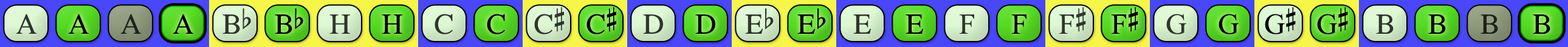
<style>
.page{position:relative;width:1568px;height:47px}
.page>*{position:absolute;margin:0}
.t1{font:29.2px "OpusChords";color:#2f352d}
.t2{font:29.2px "OpusChords";color:#000000}
.t3{font:29.2px "OpusChords";color:#1e211b}
.t4{font:29.2px "OpusChords";color:#30352d}
.t5{font:29.2px "OpusChords";color:#30362e}
.t6{font:29.2px "OpusChords";letter-spacing:-0.025em;color:#000000}
.t7{font:29.2px "OpusChords";color:#1f211b}
</style>
<div class="page">
<p class="t1" style="left:16px;top:14px;width:20px;height:20px">A</p>
<p class="t2" style="left:68px;top:14px;width:21px;height:20px">A</p>
<p class="t3" style="left:120px;top:14px;width:21px;height:20px">A</p>
<p class="t2" style="left:173px;top:14px;width:20px;height:20px">A</p>
<p class="t4" style="left:222px;top:9px;width:29px;height:25px">Bb</p>
<p class="t2" style="left:275px;top:9px;width:28px;height:25px">Bb</p>
<p class="t4" style="left:329px;top:15px;width:21px;height:19px">H</p>
<p class="t2" style="left:382px;top:15px;width:20px;height:19px">H</p>
<p class="t5" style="left:435px;top:14px;width:18px;height:21px">C</p>
<p class="t2" style="left:487px;top:14px;width:18px;height:21px">C</p>
<p class="t1" style="left:534px;top:7px;width:30px;height:28px">C#</p>
<p class="t2" style="left:586px;top:7px;width:30px;height:28px">C#</p>
<p class="t1" style="left:643px;top:15px;width:20px;height:19px">D</p>
<p class="t2" style="left:695px;top:15px;width:20px;height:19px">D</p>
<p class="t4" style="left:745px;top:9px;width:29px;height:25px">Eb</p>
<p class="t2" style="left:797px;top:9px;width:29px;height:25px">Eb</p>
<p class="t5" style="left:853px;top:15px;width:18px;height:19px">E</p>
<p class="t2" style="left:906px;top:15px;width:17px;height:19px">E</p>
<p class="t5" style="left:959px;top:15px;width:15px;height:19px">F</p>
<p class="t2" style="left:1011px;top:15px;width:15px;height:19px">F</p>
<p class="t4" style="left:1059px;top:7px;width:27px;height:27px">F#</p>
<p class="t2" style="left:1111px;top:7px;width:27px;height:27px">F#</p>
<p class="t1" style="left:1166px;top:14px;width:20px;height:21px">G</p>
<p class="t2" style="left:1219px;top:14px;width:20px;height:21px">G</p>
<p class="t6" style="left:1265px;top:7px;width:31px;height:28px">G#</p>
<p class="t6" style="left:1317px;top:7px;width:31px;height:28px">G#</p>
<p class="t4" style="left:1376px;top:15px;width:18px;height:19px">B</p>
<p class="t2" style="left:1428px;top:15px;width:18px;height:19px">B</p>
<p class="t7" style="left:1480px;top:15px;width:18px;height:19px">B</p>
<p class="t2" style="left:1533px;top:15px;width:17px;height:19px">B</p>
</div>
